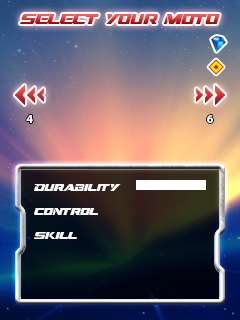
<style>
.page{position:relative;width:240px;height:320px}
.page>*{position:absolute;margin:0}
.t1{font:14px "DreamMMA"}
.t2{font:12px "MyriadPro-Bold";color:#ffffff}
.t3{font:10px "DreamMMA";color:#fffefe}
</style>
<div class="page">
<p class="t1" style="left:20px;top:14px;width:200px;height:10px">select your moto</p>
<p class="t2" style="left:26px;top:115px;width:7px;height:8px">4</p>
<p class="t2" style="left:207px;top:115px;width:7px;height:8px">6</p>
<p class="t3" style="left:34px;top:184px;width:87px;height:7px">Durability</p>
<p class="t3" style="left:34px;top:208px;width:64px;height:7px">control</p>
<p class="t3" style="left:34px;top:232px;width:43px;height:7px">skill</p>
</div>
